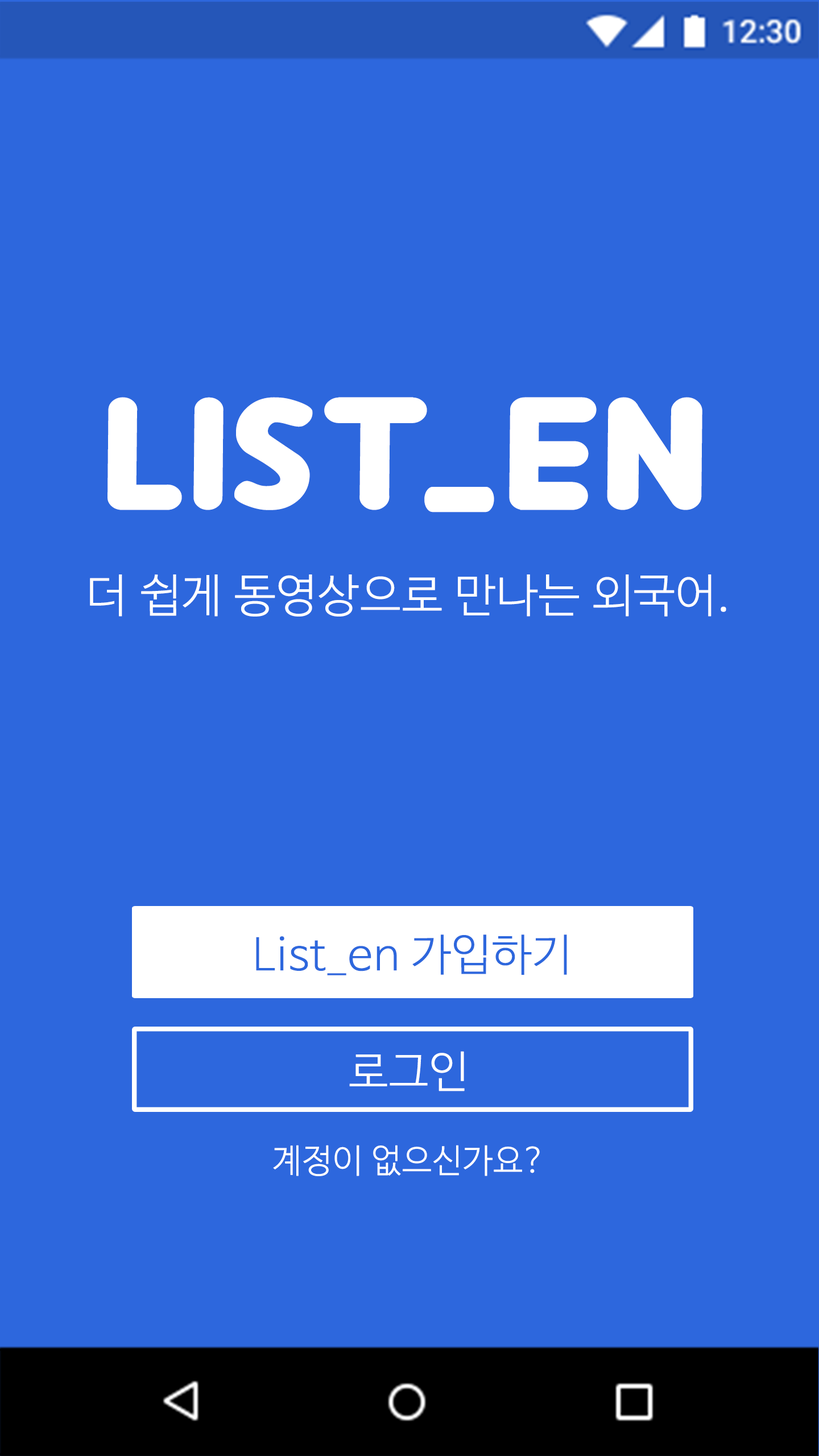
<style>
.page{position:relative;width:819px;height:1456px;background:#2d67dd}
.page>*{position:absolute;margin:0}
.t1{font:112px "Crewniverse";letter-spacing:0.02em;color:#ffffff;font-weight:bold;scale:1.14 1}
.t2{font:112px "Crewniverse";letter-spacing:-0.1em;color:#ffffff;font-weight:bold;scale:1.14 1}
.t3{font:112px "Crewniverse";letter-spacing:0.16em;color:#ffffff;font-weight:bold;scale:0.67 1}
.t4{font:45.5px "NanumBarunGothicLight";color:#ffffff;font-weight:bold}
.t5{font:44px "NanumBarunGothicLight";color:#2d67dd;font-weight:bold}
.t6{font:44px "NanumBarunGothicLight";color:#ffffff;font-weight:bold}
.t7{font:33.2px "NanumBarunGothicLight";color:#ffffff;font-weight:bold}
</style>
<div class="page">
<p class="t1" style="left:107px;top:397px;width:595px;height:115px">Lis<span class="t2">t</span><span class="t3">_</span>en</p>
<p class="t4" style="left:90px;top:574px;width:636px;height:43px">더 쉽게 동영상으로 만나는 외국어.</p>
<p class="t5" style="left:256px;top:934px;width:311px;height:41px">List_en 가입하기</p>
<p class="t6" style="left:349px;top:1051px;width:116px;height:40px">로그인</p>
<p class="t7" style="left:273px;top:1145px;width:267px;height:31px">계정이 없으신가요?</p>
</div>
